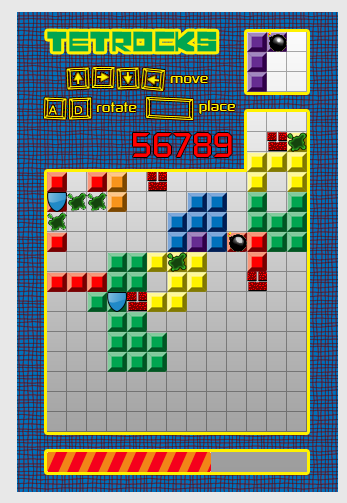
<style>
.page{position:relative;width:347px;height:503px}
.page>*{position:absolute;margin:0}
.t1{font:40px "LeningradDisco";color:#00a650;text-transform:uppercase}
.t2{font:18px "ControlFreak";color:#fff200}
.t3{font:40px "ControlFreak";color:#ff0000}
</style>
<div class="page">
<p class="t1" style="left:47px;top:31px;width:170px;height:21px">Tetrocks</p>
<p class="t2" style="left:170px;top:76px;width:38px;height:7px">move</p>
<p class="t2" style="left:97px;top:102px;width:40px;height:10px">rotate</p>
<p class="t2" style="left:199px;top:100px;width:36px;height:14px">place</p>
<p class="t3" style="left:133px;top:133px;width:99px;height:24px">56789</p>
</div>
